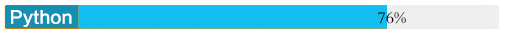
<style>
.page{position:relative;width:507px;height:35px;background:#13bff1}
.page>*{position:absolute;margin:0}
.t1{font:17px "FZLTCHK--GBK1-0";color:#ffffff}
.t2{font:17px "FZBSK--GBK1-0";color:#000000}
</style>
<div class="page">
<p class="t1" style="left:11px;top:10px;width:61px;height:17px">Python</p>
<p class="t2" style="left:377px;top:11px;width:29px;height:13px">76%</p>
</div>
